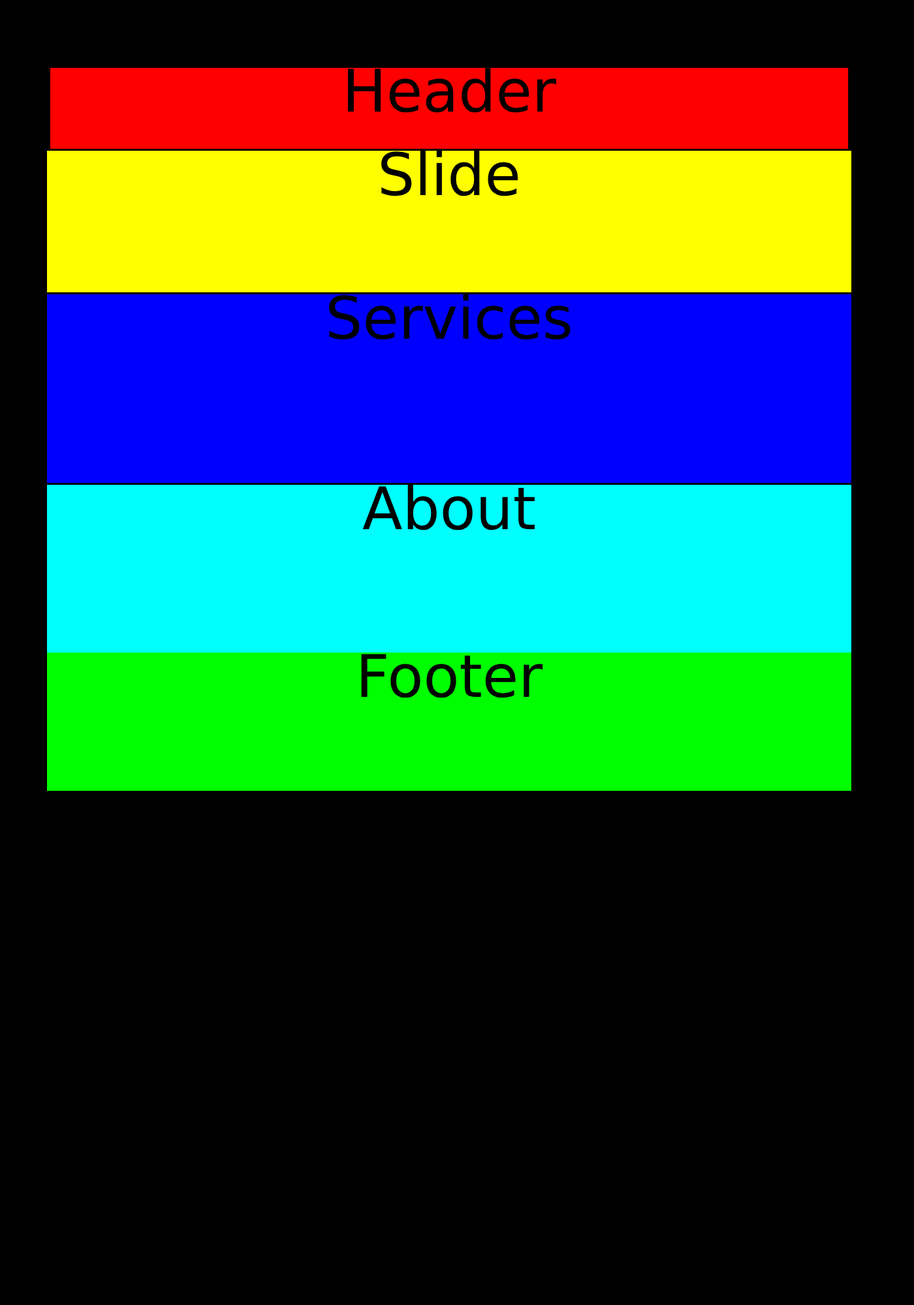
<style>
.page{position:relative;width:914px;height:1305px;background:#000000}
.page>*{position:absolute;margin:0}
.t1{font:58.7px "DejaVuSans";color:#000000}
</style>
<div class="page">
<p class="t1" style="left:347px;top:67px;width:209px;height:46px">Header</p>
<p class="t1" style="left:381px;top:150px;width:137px;height:46px">Slide</p>
<p class="t1" style="left:329px;top:294px;width:241px;height:46px">Services</p>
<p class="t1" style="left:362px;top:484px;width:172px;height:47px">About</p>
<p class="t1" style="left:361px;top:654px;width:182px;height:44px">Footer</p>
</div>
